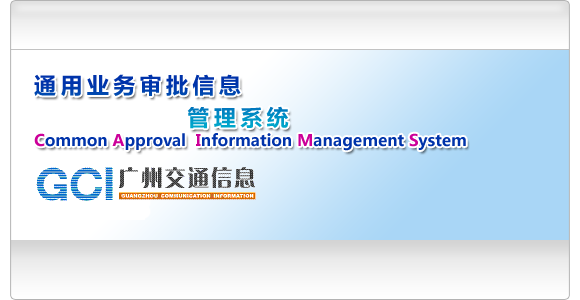
<style>
.page{position:relative;width:580px;height:300px}
.page>*{position:absolute;margin:0}
.t1{font:22px/3.4px "MicrosoftYaHei";letter-spacing:0.2em}
.t2{font:16px "MicrosoftYaHei";color:#0033aa}
.t3{font:16px "MicrosoftYaHei";color:#cc0099}
</style>
<div class="page">
<p class="t1" style="left:34px;top:74px;width:255px;height:55px">通用业务审批信息<br><br><br><br><br>              管理系统</p>
<p class="t2" style="left:34px;top:133px;width:432px;height:18px"><span class="t3">C</span>ommon <span class="t3">A</span>pproval  <span class="t3">I</span>nformation <span class="t3">M</span>anagement <span class="t3">S</span>ystem</p>
</div>
